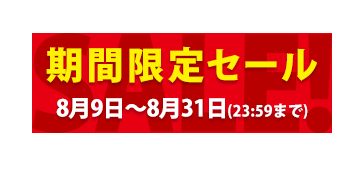
<style>
.page{position:relative;width:364px;height:170px;background:#ffffff}
.page>*{position:absolute;margin:0}
.t1{font:125.6px "KozGoPr6N-Heavy";letter-spacing:-0.03em;color:#b80000}
.t2{font:37.4px "KozGoPr6N-Heavy";letter-spacing:0.084em;color:#fef102}
.t3{font:22.9px "KozGoPr6N-Heavy";letter-spacing:-0.04em;color:#ffffff}
.t4{font:15.2px "KozGoPr6N-Heavy";color:#ffffff}
</style>
<div class="page">
<p class="t1" style="left:32px;top:33px;width:300px;height:100px">SALE!</p>
<p class="t2" style="left:46px;top:46px;width:271px;height:37px">期間限定セール</p>
<p class="t3" style="left:56px;top:98px;width:252px;height:21px">8月9日～8月31日<span class="t4">(23:59まで)</span></p>
</div>
